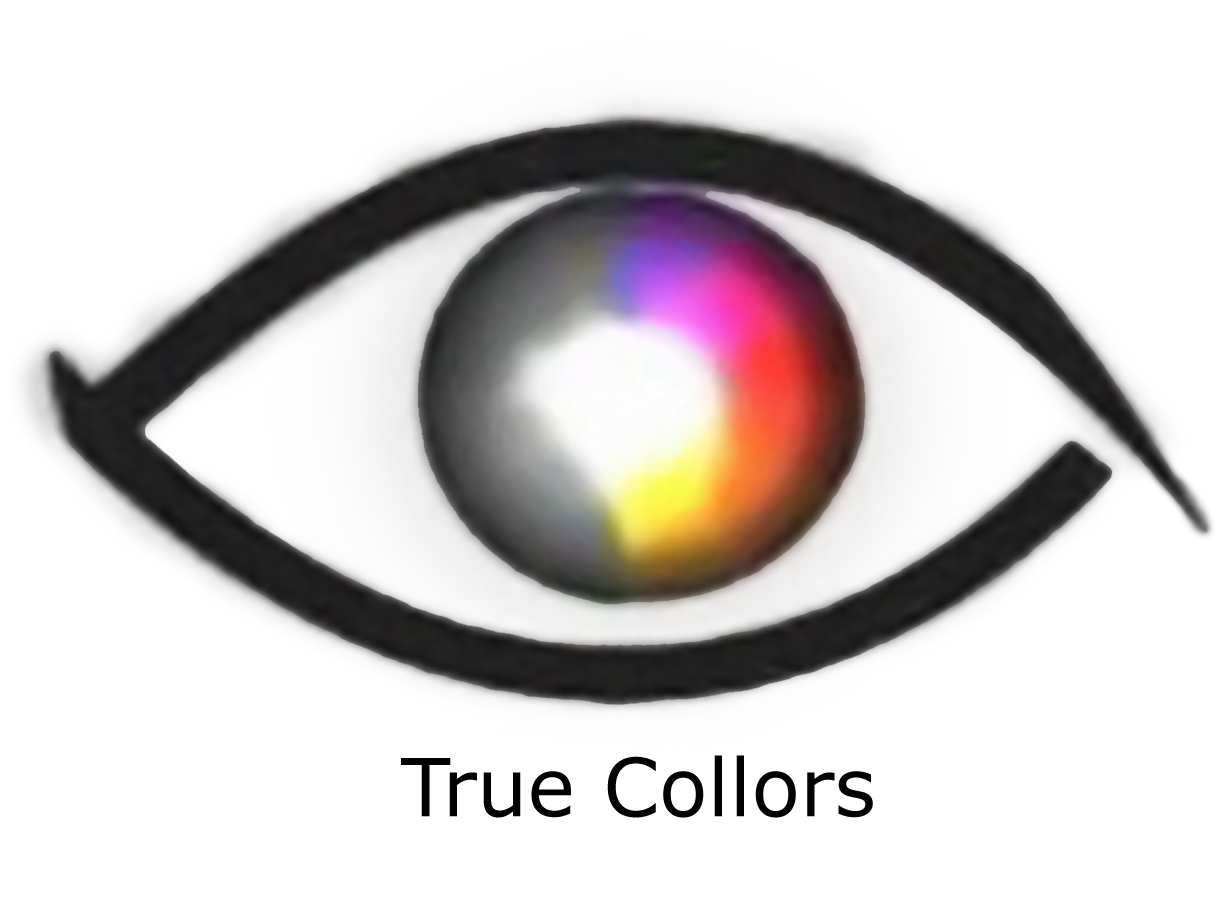
<style>
.page{position:relative;width:1220px;height:906px;background:#ffffff}
.page>*{position:absolute;margin:0}
.t1{font:80px "Verdana";color:#000000}
</style>
<div class="page">
<p class="t1" style="left:401px;top:755px;width:472px;height:63px">True Collors</p>
</div>
